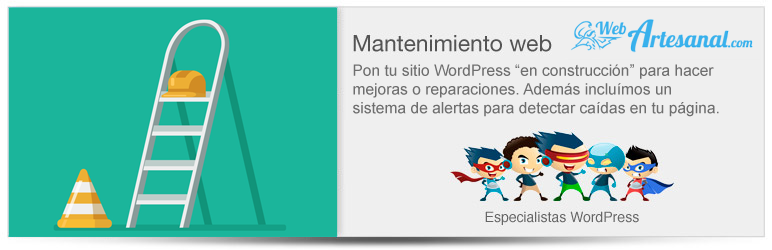
<style>
.page{position:relative;width:772px;height:250px;background:#efefef}
.page>*{position:absolute;margin:0}
.t1{font:15.6px "ArialMT";color:#6e6e6e}
</style>
<div class="page">
<p class="t1" style="left:353px;top:64px;width:366px;height:53px">Pon tu sitio WordPress “en construcción” para hacer mejoras o reparaciones. Además incluímos un <br>sistema de alertas para detectar caídas en tu página.</p>
</div>
